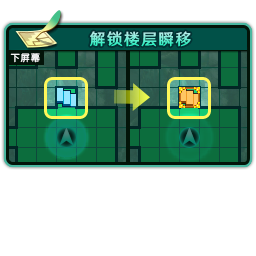
<style>
.page{position:relative;width:256px;height:256px;background:#ffffff}
.page>*{position:absolute;margin:0}
.t1{font:16px "HYWenHei-FEW";letter-spacing:0.105em;scale:0.97 1}
.t2{font:9.3px "FZY3--GB1-4";letter-spacing:0.105em;color:#ffffff;scale:0.97 1}
</style>
<div class="page">
<p class="t1" style="left:90px;top:31px;width:101px;height:16px">解锁楼层瞬移</p>
<p class="t2" style="left:10px;top:53px;width:30px;height:10px">下屏幕</p>
</div>
